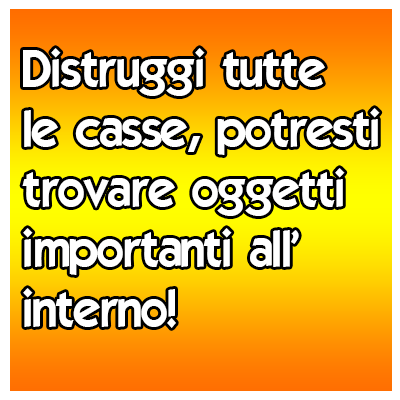
<style>
.page{position:relative;width:400px;height:400px;background:#ffffff}
.page>*{position:absolute;margin:0}
.t1{font:50px "ELEGANCE";color:#ffffff}
</style>
<div class="page">
<p class="t1" style="left:22px;top:48px;width:358px;height:280px">Distruggi tutte<br>le casse, potresti<br>trovare oggetti<br>importanti all'<br>interno!</p>
</div>
